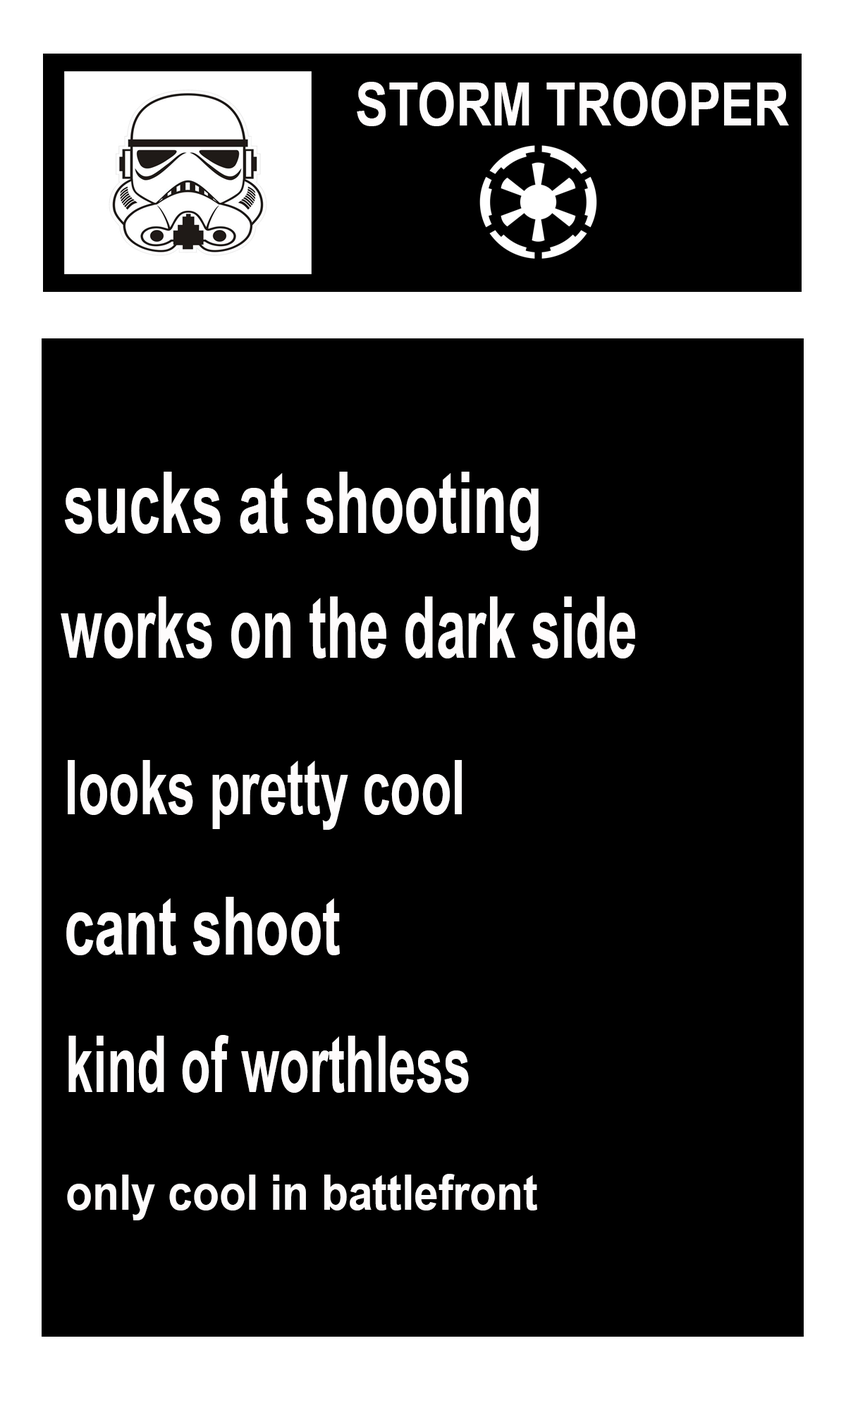
<style>
.page{position:relative;width:846px;height:1410px;background:#000000}
.page>*{position:absolute;margin:0}
.t1{font:59.9px "ArialNarrow-Bold";color:#fefcfc}
.t2{font:85.6px "ArialNarrow-Bold";color:#fefcfc;scale:0.8 1}
.t3{font:85.9px "ArialNarrow-Bold";color:#fefcfc;scale:0.76 1}
.t4{font:76.1px "ArialNarrow-Bold";color:#fefcfc;scale:0.8 1}
.t5{font:80.3px "ArialNarrow-Bold";color:#fefcfc;scale:0.83 1}
.t6{font:79.1px "ArialNarrow-Bold";color:#fefcfc;scale:0.76 1}
.t7{font:49.2px "ArialNarrow-Bold";color:#fefcfc;scale:1.09 1}
</style>
<div class="page">
<p class="t1" style="left:357px;top:82px;width:432px;height:44px">STORM TROOPER</p>
<p class="t2" style="left:65px;top:472px;width:474px;height:79px">sucks at shooting</p>
<p class="t3" style="left:61px;top:596px;width:574px;height:62px">works on the dark side</p>
<p class="t4" style="left:68px;top:760px;width:394px;height:70px">looks pretty cool</p>
<p class="t5" style="left:66px;top:897px;width:274px;height:58px">cant shoot</p>
<p class="t6" style="left:68px;top:1035px;width:401px;height:58px">kind of worthless</p>
<p class="t7" style="left:67px;top:1174px;width:470px;height:46px">only cool in battlefront</p>
</div>
